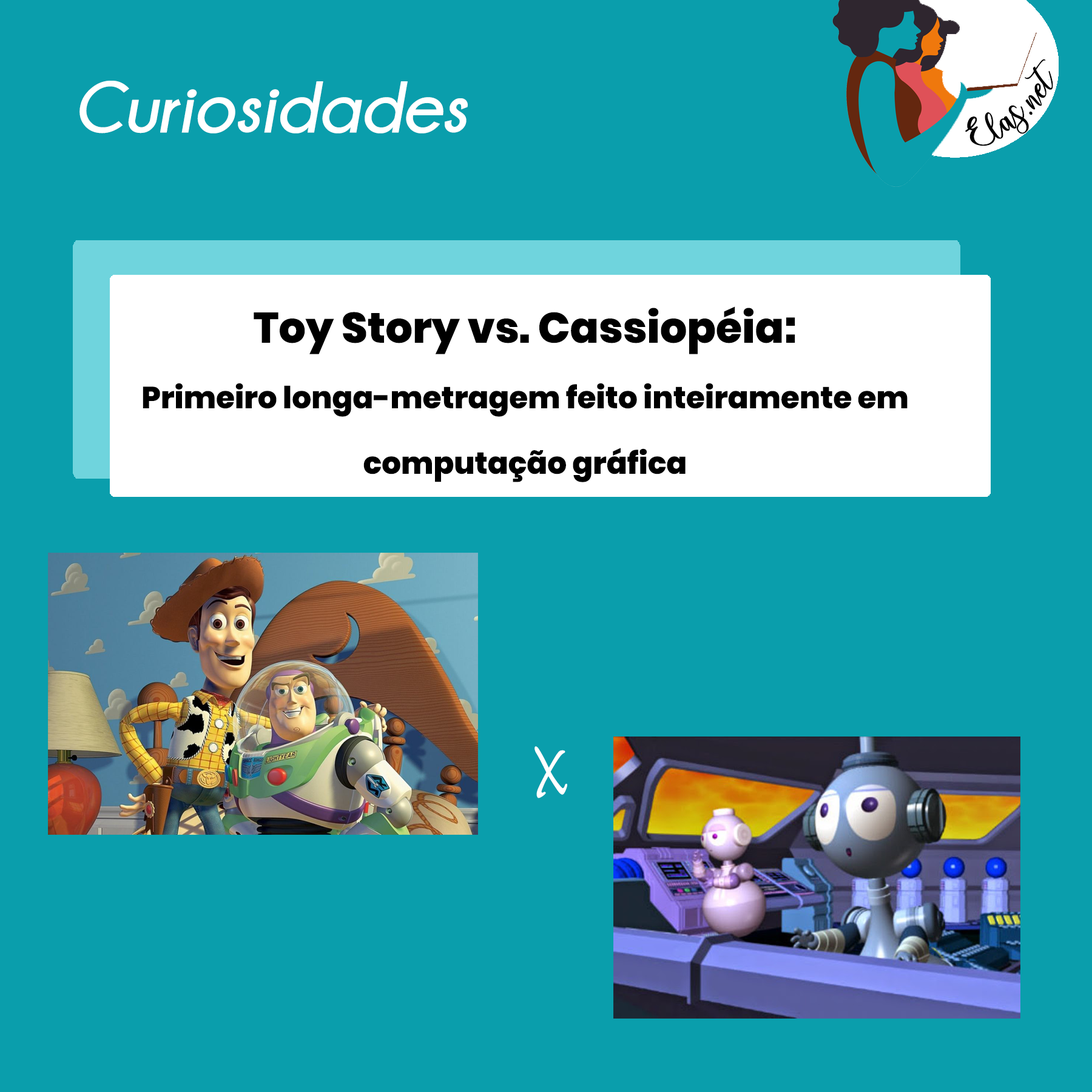
<style>
.page{position:relative;width:1092px;height:1092px;background:#0a9eac}
.page>*{position:absolute;margin:0}
.t1{font:72.8px "Champagne&Limousines-BoldItalic";color:#ffffff}
.t2{font:30.3px/65.5px "Poppins-ExtraBold";color:#000000}
.t3{font:42.5px/65.5px "Poppins-ExtraBold";color:#000000}
.t4{font:91px "InkFree";color:#ffffff}
</style>
<div class="page">
<p class="t1" style="left:79px;top:81px;width:389px;height:52px">Curiosidades</p>
<p class="t2" style="left:143px;top:306px;width:765px;height:176px;text-align:center"><span class="t3">Toy Story vs. Cassiopéia:<br></span>Primeiro longa-metragem feito inteiramente em computação gráfica</p>
<p class="t4" style="left:534px;top:746px;width:33px;height:52px">x</p>
</div>
